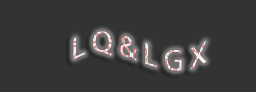
<style>
.page{position:relative;width:256px;height:92px;background:#333333}
.page>*{position:absolute;margin:0}
.t1{font:30px "MyriadPro-Regular"}
</style>
<div class="page">
<p class="t1" style="left:73px;top:31px;width:134px;height:40px">L Q &amp; L G X</p>
</div>
